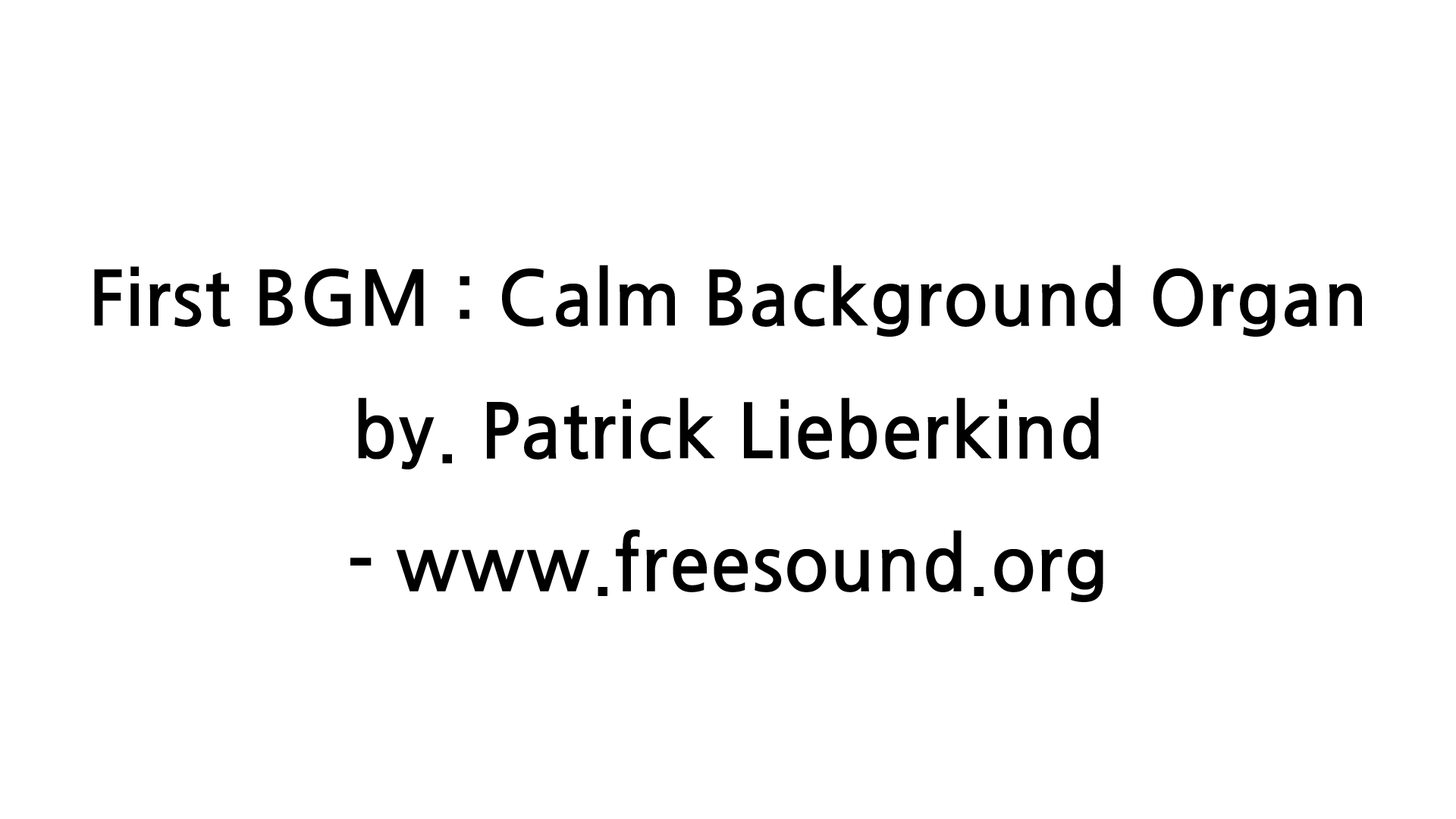
<style>
.page{position:relative;width:1456px;height:819px;background:#ffffff}
.page>*{position:absolute;margin:0}
.t1{font:75.8px "JejuGothic";color:#000000}
</style>
<div class="page">
<p class="t1" style="left:94px;top:265px;width:1268px;height:337px;text-align:center">First BGM : Calm Background Organ<br>by. Patrick Lieberkind<br>- www.freesound.org</p>
</div>
